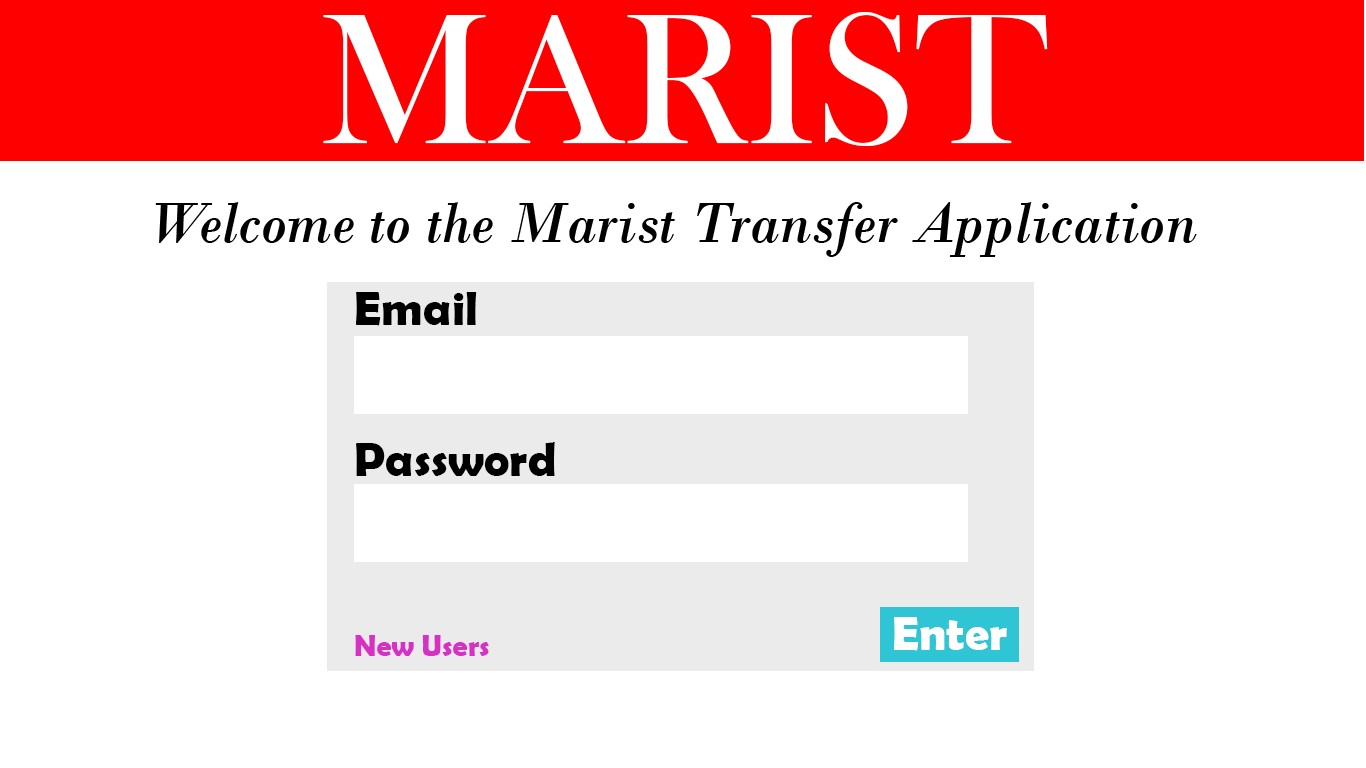
<style>
.page{position:relative;width:1366px;height:768px;background:#ffffff}
.page>*{position:absolute;margin:0}
.t1{font:192px "BaskOldFace";color:#ffffff}
.t2{font:60px "BodoniMT-Italic";color:#000000}
.t3{font:48px "BerlinSansFBDemi-Bold";color:#000000}
.t4{font:48px "BerlinSansFBDemi-Bold";color:#ffffff}
.t5{font:30px "BerlinSansFBDemi-Bold";color:#d730c5}
</style>
<div class="page">
<p class="t1" style="left:323px;top:12px;width:725px;height:134px">MARIST</p>
<p class="t2" style="left:155px;top:202px;width:1042px;height:55px">Welcome to the Marist Transfer Application</p>
<p class="t3" style="left:356px;top:292px;width:121px;height:34px">Email</p>
<p class="t3" style="left:356px;top:442px;width:199px;height:34px">Password</p>
<p class="t4" style="left:894px;top:617px;width:113px;height:34px">Enter</p>
<p class="t5" style="left:355px;top:635px;width:134px;height:21px">New Users</p>
</div>
